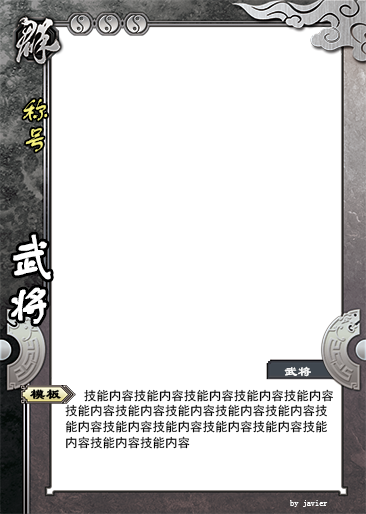
<style>
.page{position:relative;width:366px;height:514px;background:#ffffff}
.page>*{position:absolute;margin:0}
.t1{font:29.2px "FZSTK--GBK1-0";color:#f6f17d}
.t2{font:50px "FZSTK--GBK1-0";color:#ffffff;font-weight:bold}
.t3{font:13.8px "LiSu";color:#ffffff}
.t4{font:15px "LiSu";color:#000000;font-weight:bold}
.t5{font:12.5px/15.8px "SimHei";color:#000000}
.t6{font:8.3px "LiSu";color:#ffffff}
</style>
<div class="page">
<p class="t1" style="left:23px;top:99px;width:25px;height:53px">称号</p>
<p class="t2" style="left:11px;top:234px;width:40px;height:90px">武将</p>
<p class="t3" style="left:284px;top:366px;width:27px;height:11px">武将</p>
<p class="t4" style="left:30px;top:389px;width:31px;height:11px">模板</p>
<p class="t5" style="left:65px;top:389px;width:268px;height:60px">技能内容技能内容技能内容技能内容技能内容技能内容技能内容技能内容技能内容技能内容技能内容技能内容技能内容技能内容技能内容技能内容技能内容技能内容</p>
<p class="t6" style="left:290px;top:500px;width:38px;height:7px">by javier</p>
</div>
